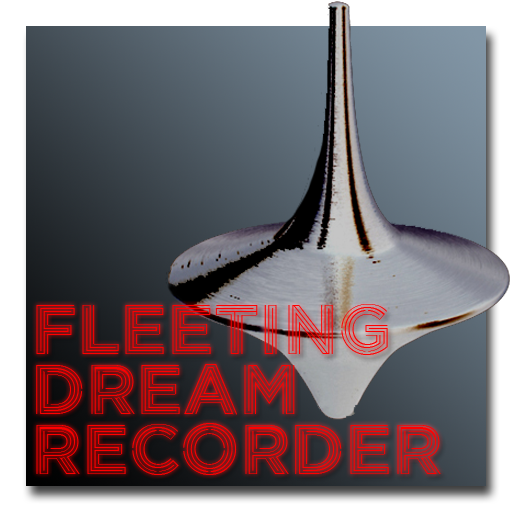
<style>
.page{position:relative;width:512px;height:512px}
.page>*{position:absolute;margin:0}
.t1{font:70px/60px "Inception";color:#ff0000}
</style>
<div class="page">
<p class="t1" style="left:36px;top:304px;width:405px;height:171px">FLEETING<br>DREAM<br>RECORDER</p>
</div>
